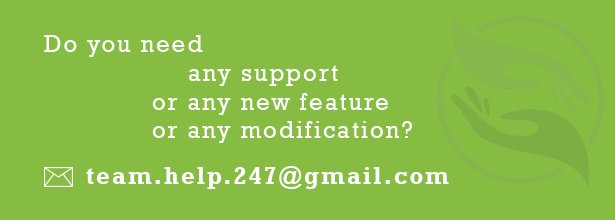
<style>
.page{position:relative;width:615px;height:220px;background:#86bc42}
.page>*{position:absolute;margin:0}
.t1{font:24px "Rockwell";letter-spacing:0.08em;color:#ffffff}
.t2{font:24px "Rockwell-Bold";letter-spacing:0.08em;color:#ffffff}
</style>
<div class="page">
<p class="t1" style="left:44px;top:35px;width:368px;height:108px">Do you need <br>    any support <br>   or any new feature<br>   or any modification?</p>
<p class="t2" style="left:86px;top:166px;width:363px;height:23px">team.help.247@gmail.com</p>
</div>
